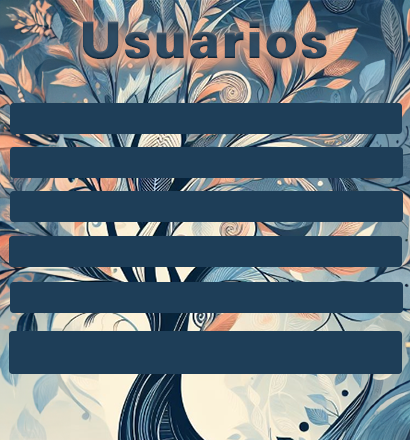
<style>
.page{position:relative;width:410px;height:440px;background:#1e3e58}
.page>*{position:absolute;margin:0}
.t1{font:50px "Univers-Black";letter-spacing:0.05em;color:#1e3e58}
</style>
<div class="page">
<p class="t1" style="left:83px;top:21px;width:244px;height:38px">Usuarios</p>
</div>
